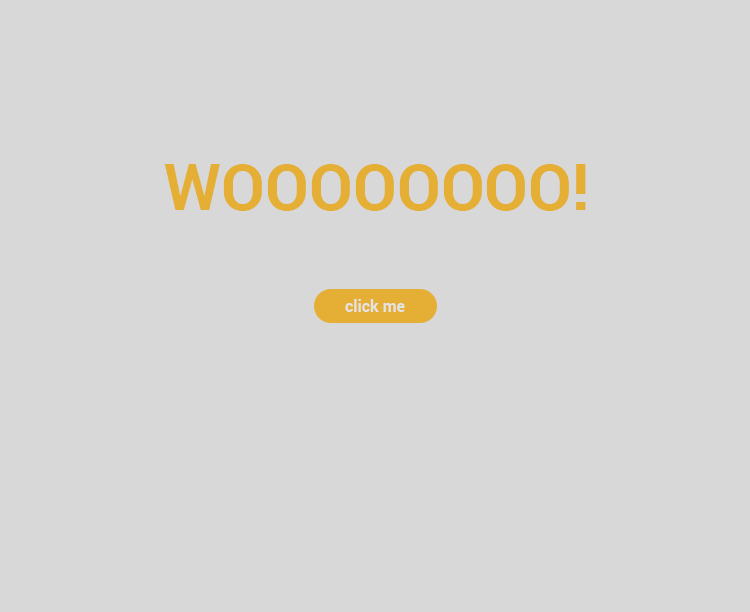
<style>
.page{position:relative;width:750px;height:612px;background:#d8d8d8}
.page>*{position:absolute;margin:0}
.t1{font:64.2px "Roboto-Bold";color:#e5ae35}
.t2{font:16px "Roboto-Bold";color:#e4e4e4}
</style>
<div class="page">
<p class="t1" style="left:164px;top:164px;width:422px;height:47px">WOOOOOOOO!</p>
<p class="t2" style="left:345px;top:299px;width:60px;height:13px">click me</p>
</div>
